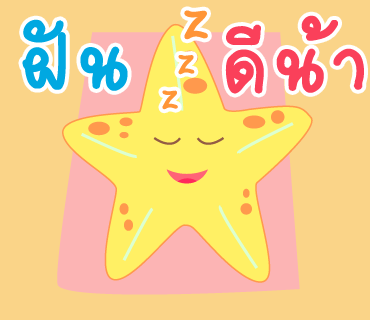
<style>
.page{position:relative;width:370px;height:320px;background:#fad488}
.page>*{position:absolute;margin:0}
.t1{font:94px "2005_iannnnnMTV";letter-spacing:0.025em;color:#ff9537;scale:1.06 1}
.t2{font:120px "2005_iannnnnMTV";letter-spacing:0.025em;color:#fa405a;scale:1.06 1}
.t3{font:120px "2005_iannnnnMTV";letter-spacing:0.025em;color:#00a8e1;scale:1.06 1}
.t4{font:63px "2005_iannnnnMTV";letter-spacing:0.025em;color:#ff9537;scale:1.06 1}
.t5{font:61px "2005_iannnnnMTV";letter-spacing:0.025em;color:#ff9537;scale:1.06 1}
</style>
<div class="page">
<p class="t1" style="left:184px;top:10px;width:24px;height:30px">z</p>
<p class="t2" style="left:225px;top:15px;width:139px;height:79px">ดีน้า</p>
<p class="t3" style="left:22px;top:19px;width:106px;height:72px">ฝัน</p>
<p class="t4" style="left:178px;top:55px;width:17px;height:20px">z</p>
<p class="t5" style="left:162px;top:90px;width:16px;height:20px">z</p>
</div>
